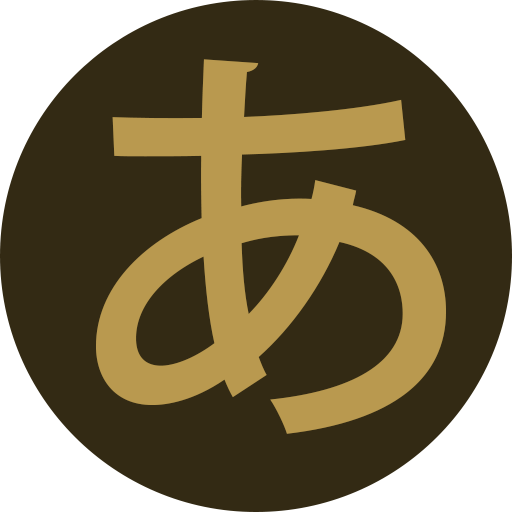
<style>
.page{position:relative;width:512px;height:512px;background:#332a14}
.page>*{position:absolute;margin:0}
.t1{font:416.7px "AdobeHeitiStd-Regular";color:#b9994f}
</style>
<div class="page">
<p class="t1" style="left:95px;top:59px;width:351px;height:375px">あ</p>
</div>
